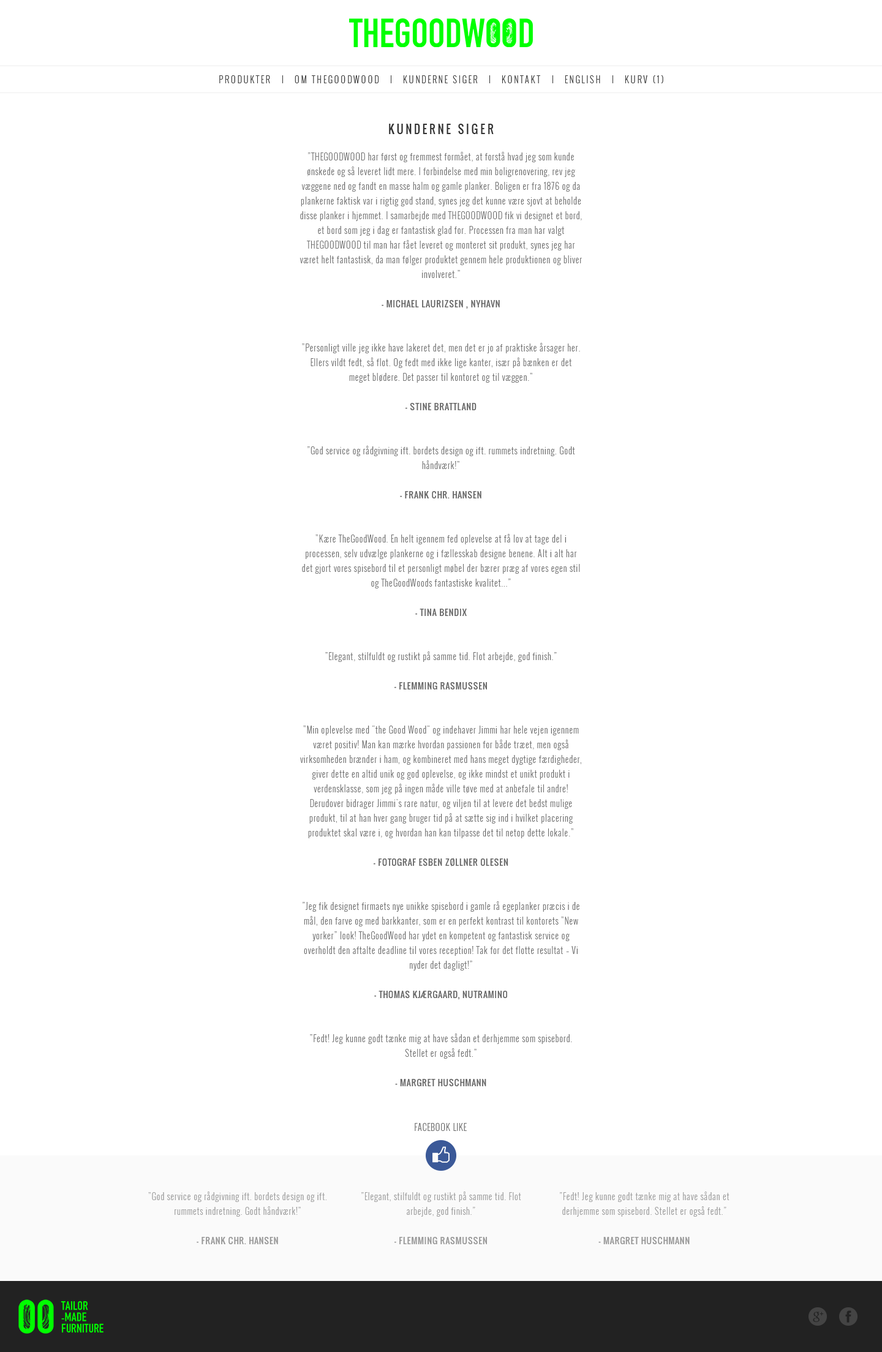
<style>
.page{position:relative;width:882px;height:1352px;background:#ffffff}
.page>*{position:absolute;margin:0}
.t1{font:11px "Oswald-Regular";letter-spacing:0.2em;color:#333333;text-transform:uppercase}
.t2{font:8.6px/14.7px "Oswald-Light";letter-spacing:0.05em;color:#666666}
.t3{font:8.6px/14.7px "Oswald-Regular";letter-spacing:0.05em;color:#666666}
</style>
<div class="page">
<p class="t1" style="left:389px;top:124px;width:105px;height:10px">Kunderne siger</p>
<p class="t2" style="left:299px;top:152px;width:283px;height:934px;text-align:center">”THEGOODWOOD har først og fremmest formået, at forstå hvad jeg som kunde ønskede og så leveret lidt mere. I forbindelse med min boligrenovering, rev jeg væggene ned og fandt en masse halm og gamle planker. Boligen er fra 1876 og da plankerne faktisk var i rigtig god stand, synes jeg det kunne være sjovt at beholde disse planker i hjemmet. I samarbejde med THEGOODWOOD fik vi designet et bord, et bord som jeg i dag er fantastisk glad for. Processen fra man har valgt THEGOODWOOD til man har fået leveret og monteret sit produkt, synes jeg har været helt fantastisk, da man følger produktet gennem hele produktionen og bliver involveret.”<br><br><span class="t3">- MICHAEL LAURIZSEN , NYHAVN<br><br><br></span>”Personligt ville jeg ikke have lakeret det, men det er jo af praktiske årsager her. Ellers vildt fedt, så flot. Og fedt med ikke lige kanter, især på bænken er det meget blødere. Det passer til kontoret og til væggen.”<br><br><span class="t3">- STINE BRATTLAND<br><br><br></span>”God service og rådgivning ift. bordets design og ift. rummets indretning. Godt håndværk!”<br><br><span class="t3">- FRANK CHR. HANSEN<br><br><br></span>”Kære TheGoodWood. En helt igennem fed oplevelse at få lov at tage del i processen, selv udvælge plankerne og i fællesskab designe benene. Alt i alt har det gjort vores spisebord til et personligt møbel der bærer præg af vores egen stil og TheGoodWoods fantastiske kvalitet...”<br><br><span class="t3">- TINA BENDIX<br><br><br></span>”Elegant, stilfuldt og rustikt på samme tid. Flot arbejde, god finish.”<br><br><span class="t3">- FLEMMING RASMUSSEN<br><br><br></span>”Min oplevelse med "the Good Wood" og indehaver Jimmi har hele vejen igennem været positiv! Man kan mærke hvordan passionen for både træet, men også virksomheden brænder i ham, og kombineret med hans meget dygtige færdigheder, giver dette en altid unik og god oplevelse, og ikke mindst et unikt produkt i verdensklasse, som jeg på ingen måde ville tøve med at anbefale til andre! Derudover bidrager Jimmi's rare natur, og viljen til at levere det bedst mulige produkt, til at han hver gang bruger tid på at sætte sig ind i hvilket placering produktet skal være i, og hvordan han kan tilpasse det til netop dette lokale.”<br><br><span class="t3">- FOTOGRAF ESBEN ZØLLNER OLESEN<br><br><br></span>”Jeg fik designet firmaets nye unikke spisebord i gamle rå egeplanker præcis i de mål, den farve og med barkkanter, som er en perfekt kontrast til kontorets ”New yorker” look! TheGoodWood har ydet en kompetent og fantastisk service og overholdt den aftalte deadline til vores reception! Tak for det flotte resultat – Vi nyder det dagligt!”<br><br><span class="t3">- THOMAS KJÆRGAARD, NUTRAMINO<br><br><br></span>”Fedt! Jeg kunne godt tænke mig at have sådan et derhjemme som spisebord. Stellet er også fedt.”<br><br><span class="t3">- MARGRET HUSCHMANN</span></p>
</div>
